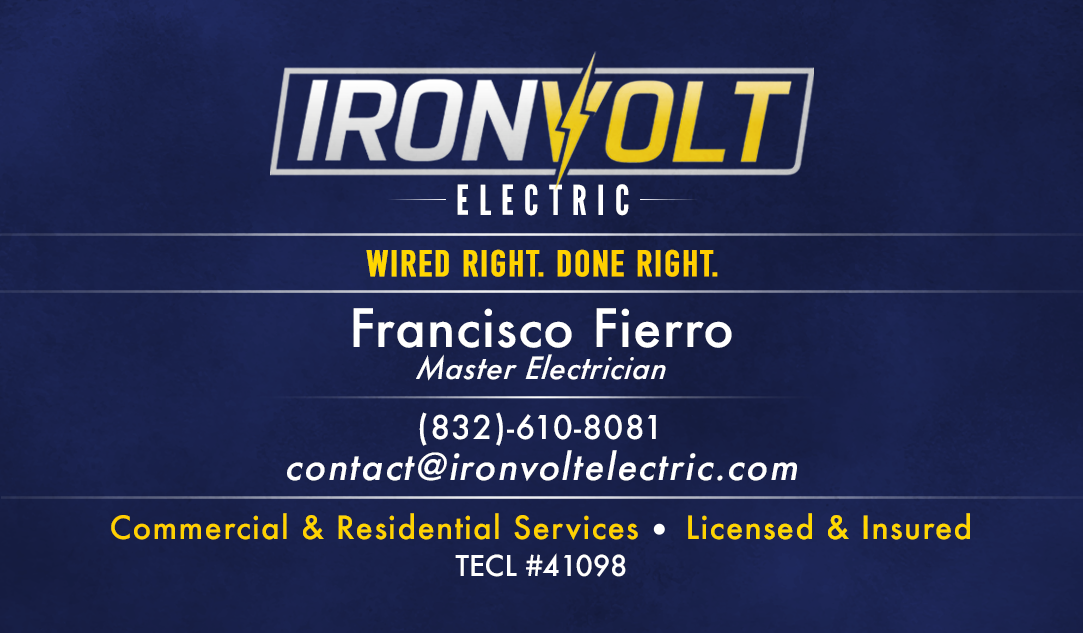
<style>
.page{position:relative;width:1083px;height:633px}
.page>*{position:absolute;margin:0}
.t1{font:41.2px "LeagueGothic-Regular";letter-spacing:0.25em;color:#ffffff}
.t2{font:36.6px "DINCondensed-Bold";letter-spacing:0.04em;color:#ffd200;font-weight:bold}
.t3{font:51.4px "Futura-Medium";letter-spacing:0.02em;color:#ffffff}
.t4{font:29.8px "Futura-MediumItalic";letter-spacing:0.015em;color:#ffffff;font-style:italic}
.t5{font:31.7px "Futura-Medium";letter-spacing:0.05em;color:#ffffff}
.t6{font:36px "Futura-Medium";letter-spacing:0.05em;color:#ffffff;font-style:italic}
.t7{font:31.3px "Futura-Medium";letter-spacing:0.04em;color:#ffd200}
.t8{font:28px "Futura-Medium";color:#ffffff}
</style>
<div class="page">
<p class="t1" style="left:457px;top:184px;width:172px;height:32px">ELECTRIC</p>
<p class="t2" style="left:366px;top:249px;width:352px;height:28px">WIRED RIGHT. DONE RIGHT.</p>
<p class="t3" style="left:353px;top:308px;width:379px;height:40px">Francisco Fierro</p>
<p class="t4" style="left:416px;top:354px;width:250px;height:27px">Master Electrician</p>
<p class="t5" style="left:419px;top:412px;width:237px;height:34px">(832)-610-8081</p>
<p class="t6" style="left:287px;top:450px;width:510px;height:31px">contact@ironvoltelectric.com</p>
<p class="t7" style="left:111px;top:513px;width:527px;height:27px">Commercial &amp; Residential Services</p>
<p class="t7" style="left:688px;top:513px;width:282px;height:27px">Licensed &amp; Insured</p>
<p class="t8" style="left:455px;top:553px;width:171px;height:24px">TECL #41098</p>
</div>
